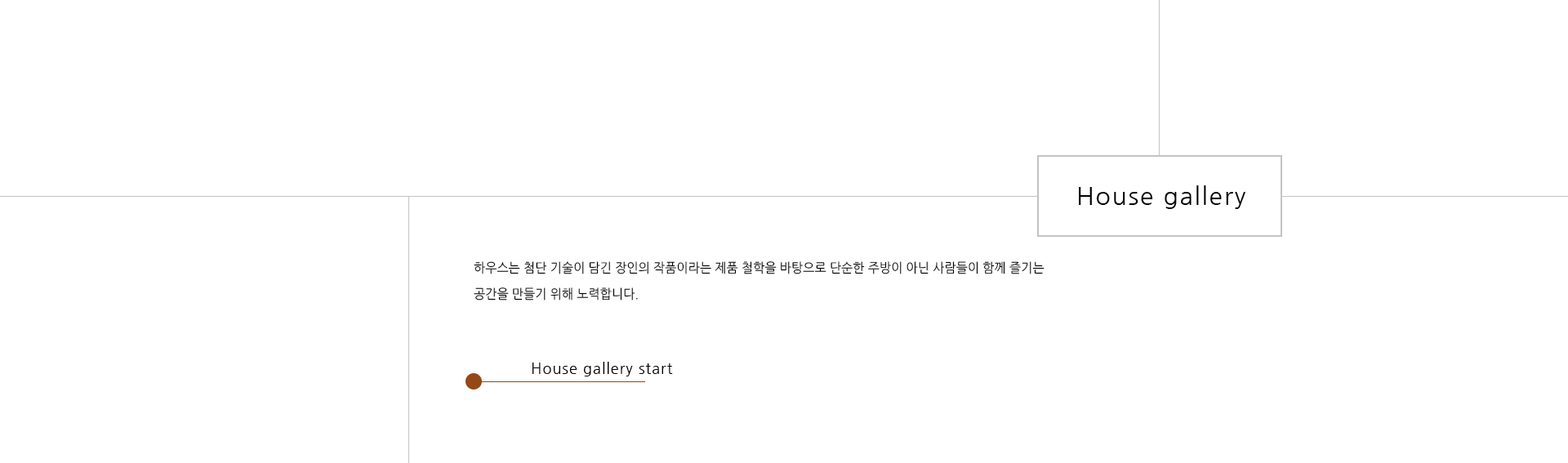
<style>
.page{position:relative;width:1568px;height:463px;background:#ffffff}
.page>*{position:absolute;margin:0}
.t1{font:24.5px "NanumGothic";letter-spacing:0.06em;color:#000000}
.t2{font:13.1px/26.1px "NanumGothic";color:#000000;scale:0.94 1}
.t3{font:14.7px "NanumGothic";letter-spacing:0.06em;color:#000000}
</style>
<div class="page">
<p class="t1" style="left:1079px;top:185px;width:166px;height:24px">House gallery</p>
<p class="t2" style="left:474px;top:261px;width:571px;height:40px">하우스는 첨단 기술이 담긴 장인의 작품이라는 제품 철학을 바탕으로 단순한 주방이 아닌 사람들이 함께 즐기는 공간을 만들기 위해 노력합니다.</p>
<p class="t3" style="left:532px;top:362px;width:141px;height:14px">House gallery start</p>
</div>
